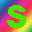
<style>
.page{position:relative;width:32px;height:32px;background:#47e600}
.page>*{position:absolute;margin:0}
.t1{font:31.9px "Arial-Black";color:#47e600;scale:0.92 1}
</style>
<div class="page">
<p class="t1" style="left:7px;top:5px;width:19px;height:23px">S</p>
</div>
